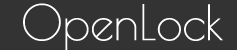
<style>
.page{position:relative;width:237px;height:50px;background:#333333}
.page>*{position:absolute;margin:0}
.t1{font:48px "PoiretOne-Regular";color:#ffffff}
</style>
<div class="page">
<p class="t1" style="left:23px;top:3px;width:200px;height:47px">OpenLock</p>
</div>
